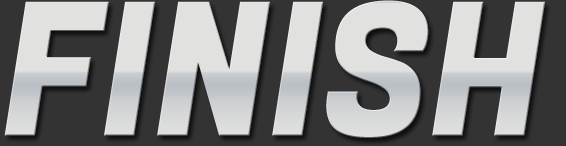
<style>
.page{position:relative;width:566px;height:146px;background:#333333}
.page>*{position:absolute;margin:0}
.t1{font:185.2px "FugazOne-Regular";color:#dfdfdf;scale:0.89 1}
</style>
<div class="page">
<p class="t1" style="left:4px;top:0px;width:541px;height:138px">FINISH</p>
</div>
